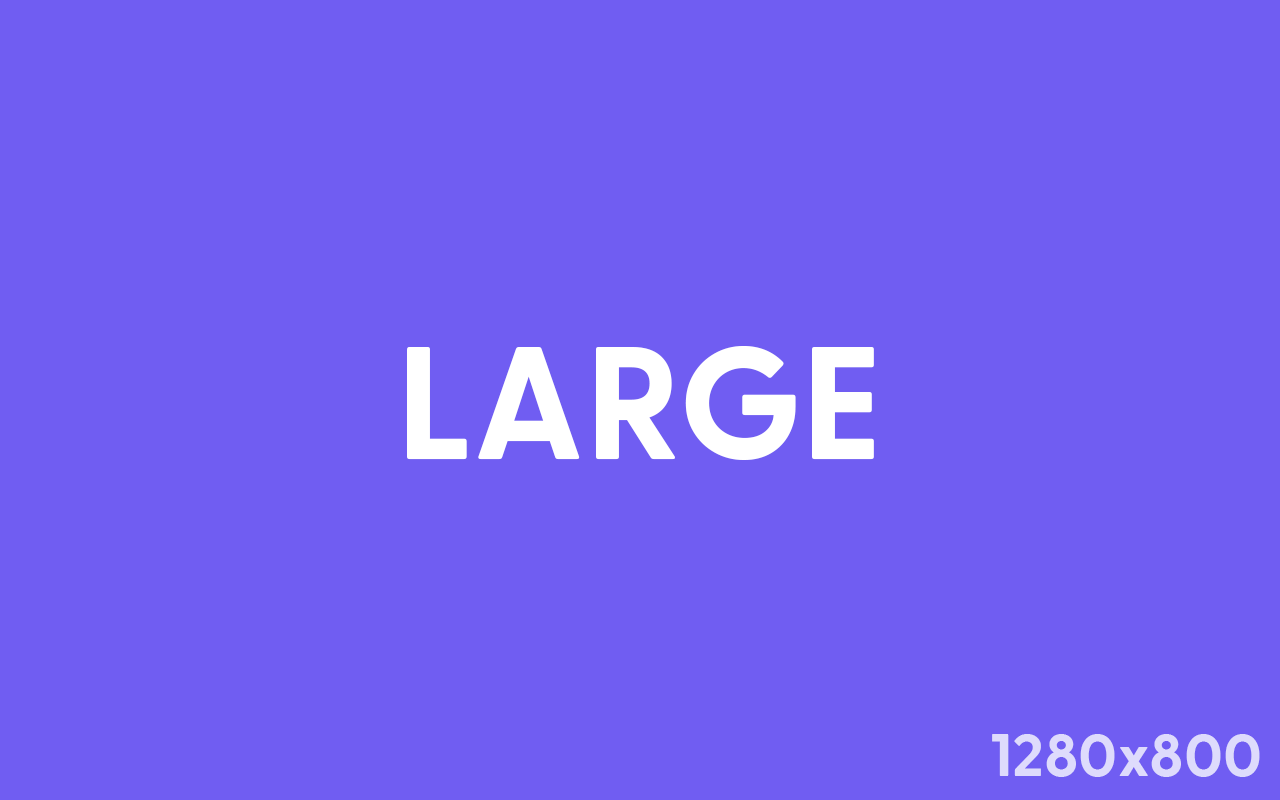
<style>
.page{position:relative;width:1280px;height:800px;background:#705df2}
.page>*{position:absolute;margin:0}
.t1{font:160px "GreycliffCF-Bold";color:#ffffff}
.t2{font:60px "GreycliffCF-Bold";color:#dedbfc}
</style>
<div class="page">
<p class="t1" style="left:407px;top:346px;width:467px;height:114px">LARGE</p>
<p class="t2" style="left:992px;top:734px;width:268px;height:43px">1280x800</p>
</div>
